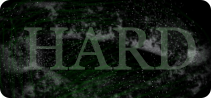
<style>
.page{position:relative;width:211px;height:98px}
.page>*{position:absolute;margin:0}
.t1{font:60px "Georgia";color:#3b4c3b}
</style>
<div class="page">
<p class="t1" style="left:24px;top:27px;width:172px;height:43px">HARD</p>
</div>
